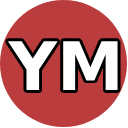
<style>
.page{position:relative;width:128px;height:128px;background:#bb3c3c}
.page>*{position:absolute;margin:0}
.t1{font:67px "DejaVuSans-Bold";color:#ffffff}
</style>
<div class="page">
<p class="t1" style="left:7px;top:41px;width:111px;height:49px">YM</p>
</div>
